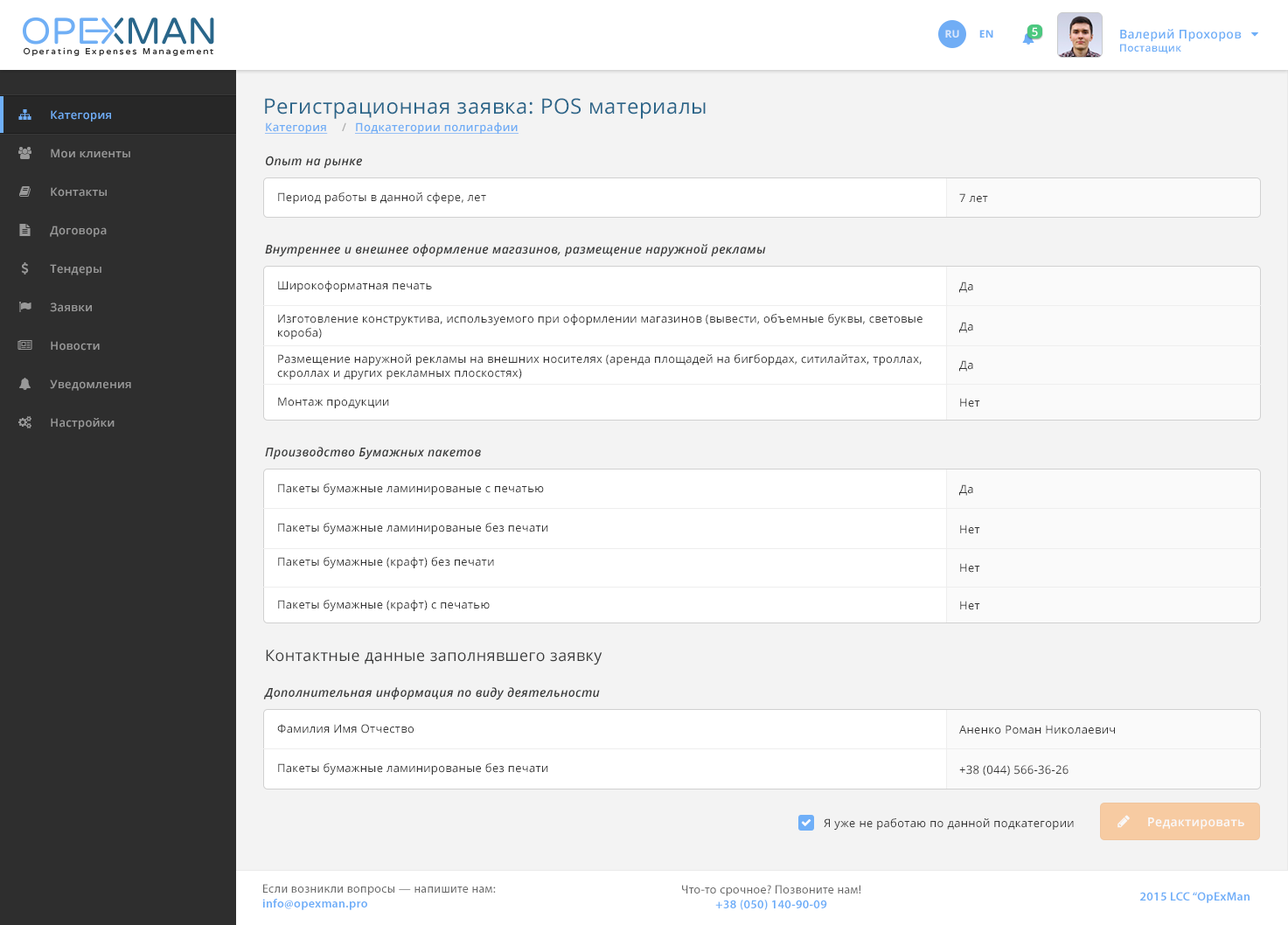
<style>
.page{position:relative;width:1288px;height:925px;background:#ffffff}
.page>*{position:absolute;margin:0}
.t1{font:10.5px "OpenSans-Bold";letter-spacing:0.025em;color:#dbe8fc;text-transform:uppercase}
.t2{font:10.5px "OpenSans-Bold";letter-spacing:0.025em;color:#6faff8;text-transform:uppercase}
.t3{font:11.4px "OpenSans-Semibold";letter-spacing:0.025em;color:#ffffff}
.t4{font:12.2px "OpenSans-Semibold";letter-spacing:0.025em;color:#6eaef7}
.t5{font:10.5px "OpenSans-Semibold";letter-spacing:0.025em;color:#6eaef7}
.t6{font:21px "OpenSans";letter-spacing:0.025em;color:#2a6589}
.t7{font:11.4px "OpenSans-Semibold";letter-spacing:0.025em;color:#70adf5}
.t8{font:11.4px "OpenSans-Semibold";letter-spacing:0.025em;color:#70adf5;text-decoration:underline}
.t9{font:11.3px "OpenSans-Semibold";letter-spacing:0.025em;color:#afafaf}
.t10{font:11.4px "OpenSans-Semibold";letter-spacing:0.025em;color:#999999}
.t11{font:12.2px "OpenSans-SemiboldItalic";letter-spacing:0.025em;color:#373838}
.t12{font:11.4px "OpenSans";letter-spacing:0.025em;color:#333333}
.t13{font:15.7px "OpenSans";letter-spacing:0.025em;color:#373838}
.t14{font:12.2px "OpenSans-Semibold";letter-spacing:0.025em;color:#ffffff}
.t15{font:12.2px "MyriadPro-Regular";letter-spacing:0.025em;color:#696969}
.t16{font:12.2px "MyriadPro-Semibold";letter-spacing:0.025em;color:#6eaef8}
</style>
<div class="page">
<p class="t1" style="left:946px;top:30px;width:14px;height:8px">Ru</p>
<p class="t2" style="left:980px;top:30px;width:14px;height:8px">EN</p>
<p class="t3" style="left:1032px;top:27px;width:6px;height:10px">5</p>
<p class="t4" style="left:1121px;top:29px;width:121px;height:25px">Валерий Прохоров<br><span class="t5">Поставщик</span></p>
<p class="t6" style="left:265px;top:98px;width:441px;height:21px">Регистрационная заявка: POS материалы</p>
<p class="t7" style="left:51px;top:110px;width:60px;height:12px">Категория</p>
<p class="t8" style="left:265px;top:122px;width:63px;height:12px">Категория</p>
<p class="t9" style="left:342px;top:122px;width:4px;height:9px">/</p>
<p class="t8" style="left:355px;top:122px;width:164px;height:12px">Подкатегории полиграфии</p>
<p class="t10" style="left:51px;top:149px;width:79px;height:9px">Мои клиенты</p>
<p class="t11" style="left:266px;top:156px;width:96px;height:13px">Опыт на рынке</p>
<p class="t10" style="left:51px;top:187px;width:56px;height:10px">Контакты</p>
<p class="t12" style="left:278px;top:192px;width:208px;height:12px">Период работы в данной сфере, лет</p>
<p class="t12" style="left:960px;top:193px;width:28px;height:10px">7 лет</p>
<p class="t10" style="left:50px;top:226px;width:57px;height:11px">Договора</p>
<p class="t11" style="left:265px;top:244px;width:501px;height:13px">Внутреннее и внешнее оформление магазинов, размещение наружной рекламы</p>
<p class="t10" style="left:50px;top:264px;width:51px;height:12px">Тендеры</p>
<p class="t12" style="left:278px;top:281px;width:154px;height:11px">Широкоформатная печать</p>
<p class="t12" style="left:960px;top:282px;width:14px;height:11px">Да</p>
<p class="t10" style="left:50px;top:303px;width:42px;height:9px">Заявки</p>
<p class="t12" style="left:278px;top:314px;width:645px;height:25px">Изготовление конструктива, используемого при оформлении магазинов (вывести, объемные буквы, световые <br>короба)</p>
<p class="t12" style="left:960px;top:322px;width:14px;height:11px">Да</p>
<p class="t10" style="left:51px;top:341px;width:49px;height:10px">Новости</p>
<p class="t12" style="left:277px;top:354px;width:645px;height:26px">Размещение наружной рекламы на внешних носителях (аренда площадей на бигбордах, ситилайтах, троллах, <br>скроллах и других рекламных плоскостях)</p>
<p class="t12" style="left:960px;top:360px;width:14px;height:12px">Да</p>
<p class="t10" style="left:50px;top:380px;width:81px;height:11px">Уведомления</p>
<p class="t12" style="left:278px;top:397px;width:111px;height:11px">Монтаж продукции</p>
<p class="t12" style="left:960px;top:398px;width:21px;height:10px">Нет</p>
<p class="t10" style="left:51px;top:418px;width:64px;height:11px">Настройки</p>
<p class="t11" style="left:265px;top:447px;width:216px;height:13px">Производство Бумажных пакетов</p>
<p class="t12" style="left:278px;top:484px;width:266px;height:11px">Пакеты бумажные ламинированые с печатью</p>
<p class="t12" style="left:960px;top:485px;width:14px;height:11px">Да</p>
<p class="t12" style="left:278px;top:523px;width:270px;height:11px">Пакеты бумажные ламинированые без печати</p>
<p class="t12" style="left:960px;top:525px;width:21px;height:9px">Нет</p>
<p class="t12" style="left:278px;top:557px;width:216px;height:12px">Пакеты бумажные (крафт) без печати</p>
<p class="t12" style="left:960px;top:563px;width:21px;height:10px">Нет</p>
<p class="t12" style="left:278px;top:600px;width:212px;height:11px">Пакеты бумажные (крафт) с печатью</p>
<p class="t12" style="left:960px;top:601px;width:21px;height:10px">Нет</p>
<p class="t13" style="left:266px;top:650px;width:337px;height:16px">Контактные данные заполнявшего заявку</p>
<p class="t11" style="left:263px;top:688px;width:337px;height:13px">Дополнительная информация по виду деятельности</p>
<p class="t12" style="left:277px;top:724px;width:137px;height:10px">Фамилия Имя Отчество</p>
<p class="t12" style="left:960px;top:725px;width:155px;height:10px">Аненко Роман Николаевич</p>
<p class="t12" style="left:278px;top:764px;width:270px;height:11px">Пакеты бумажные ламинированые без печати</p>
<p class="t12" style="left:960px;top:765px;width:109px;height:11px">+38 (044) 566-36-26</p>
<p class="t12" style="left:824px;top:819px;width:250px;height:11px">Я уже не работаю по данной подкатегории</p>
<p class="t14" style="left:1149px;top:818px;width:96px;height:12px">Редактировать</p>
<p class="t15" style="left:262px;top:884px;width:234px;height:27px">Если возникли вопросы — напишите нам:<br><span class="t16">info@opexman.pro</span></p>
<p class="t15" style="left:682px;top:885px;width:180px;height:26px;text-align:center">Что-то срочное? Позвоните нам!<br><span class="t16">+38 (050) 140-90-09</span></p>
<p class="t16" style="left:1141px;top:892px;width:109px;height:12px">2015 LCC “OpExMan</p>
</div>
